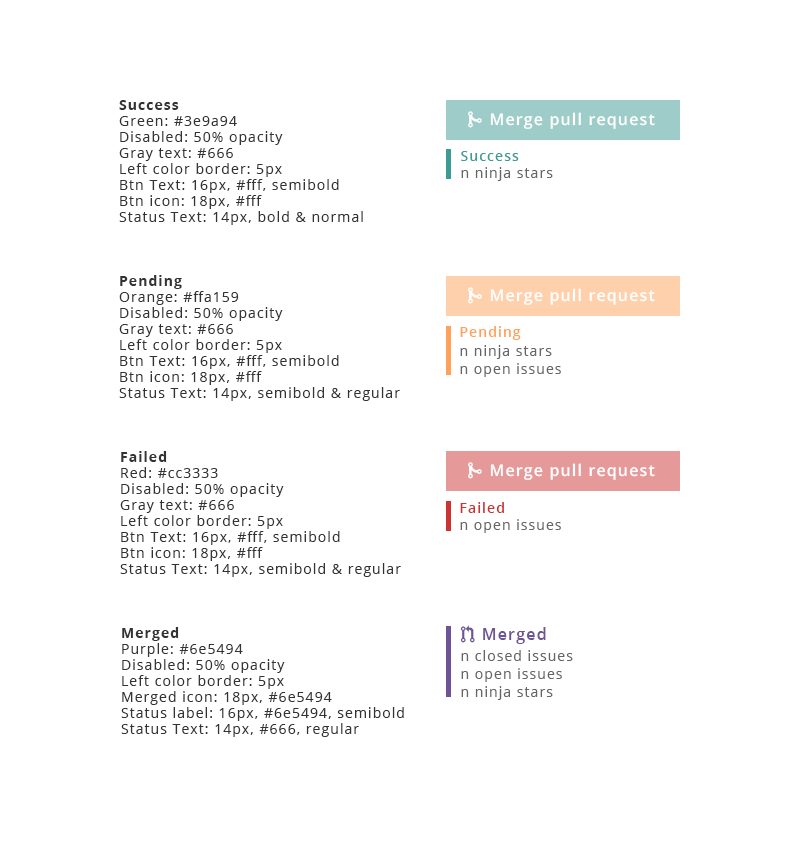
<style>
.page{position:relative;width:800px;height:850px;background:#ffffff}
.page>*{position:absolute;margin:0}
.t1{font:14px/16px "OpenSans";letter-spacing:0.075em;color:#333333}
.t2{font:14px/16px "OpenSans-Bold";letter-spacing:0.075em;color:#333333}
.t3{font:16px "OpenSans-Semibold";letter-spacing:0.075em;color:#ffffff}
.t4{font:14px "OpenSans-Semibold";letter-spacing:0.075em;color:#3e9a94}
.t5{font:14px "OpenSans";letter-spacing:0.075em;color:#666666}
.t6{font:14px "OpenSans-Semibold";letter-spacing:0.075em;color:#ffa159}
.t7{font:14px/18px "OpenSans";letter-spacing:0.075em;color:#666666}
.t8{font:14px "OpenSans-Semibold";letter-spacing:0.075em;color:#cc3333}
.t9{font:16px "OpenSans-Semibold";letter-spacing:0.075em;color:#6e5494}
</style>
<div class="page">
<p class="t1" style="left:119px;top:100px;width:244px;height:125px"><span class="t2">Success<br></span>Green: #3e9a94<br>Disabled: 50% opacity<br>Gray text: #666<br>Left color border: 5px<br>Btn Text: 16px, #fff, semibold<br>Btn icon: 18px, #fff<br>Status Text: 14px, bold &amp; normal</p>
<p class="t3" style="left:490px;top:112px;width:165px;height:17px">Merge pull request</p>
<p class="t4" style="left:461px;top:151px;width:58px;height:10px">Success</p>
<p class="t5" style="left:461px;top:167px;width:92px;height:14px">n ninja stars</p>
<p class="t1" style="left:119px;top:275px;width:281px;height:126px"><span class="t2">Pending<br></span>Orange: #ffa159<br>Disabled: 50% opacity<br>Gray text: #666<br>Left color border: 5px<br>Btn Text: 16px, #fff, semibold<br>Btn icon: 18px, #fff<br>Status Text: 14px, semibold &amp; regular</p>
<p class="t3" style="left:490px;top:288px;width:165px;height:17px">Merge pull request</p>
<p class="t6" style="left:460px;top:326px;width:61px;height:14px">Pending</p>
<p class="t7" style="left:460px;top:345px;width:101px;height:32px">n ninja stars<br>n open issues</p>
<p class="t1" style="left:120px;top:451px;width:281px;height:126px"><span class="t2">Failed<br></span>Red: #cc3333<br>Disabled: 50% opacity<br>Gray text: #666<br>Left color border: 5px<br>Btn Text: 16px, #fff, semibold<br>Btn icon: 18px, #fff<br>Status Text: 14px, semibold &amp; regular</p>
<p class="t3" style="left:490px;top:463px;width:165px;height:17px">Merge pull request</p>
<p class="t8" style="left:460px;top:502px;width:44px;height:11px">Failed</p>
<p class="t5" style="left:460px;top:519px;width:101px;height:14px">n open issues</p>
<p class="t1" style="left:121px;top:627px;width:283px;height:110px"><span class="t2">Merged<br></span>Purple: #6e5494<br>Disabled: 50% opacity<br>Left color border: 5px<br>Merged icon: 18px, #6e5494<br>Status label: 16px, #6e5494, semibold<br>Status Text: 14px, #666, regular</p>
<p class="t9" style="left:483px;top:627px;width:63px;height:17px">Merged</p>
<p class="t7" style="left:461px;top:650px;width:112px;height:50px">n closed issues<br>n open issues<br>n ninja stars</p>
</div>
